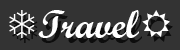
<style>
.page{position:relative;width:180px;height:50px;background:#333333}
.page>*{position:absolute;margin:0}
.t1{font:38.6px "ScriptMTBold";color:#ffffff}
.t2{font:38.6px "Wingdings-Regular";color:#ffffff}
</style>
<div class="page">
<p class="t1" style="left:9px;top:10px;width:161px;height:28px"><span class="t2">T</span>Travel<span class="t2">R</span></p>
</div>
